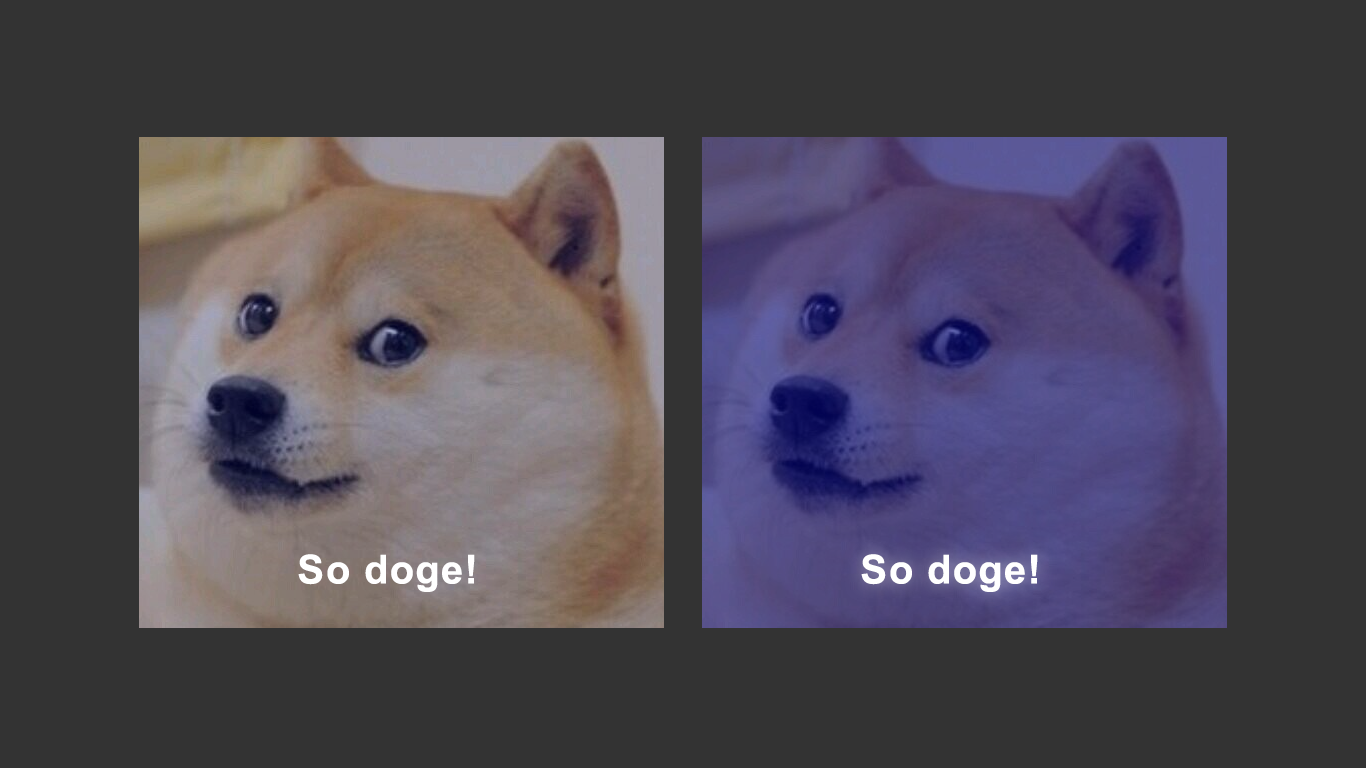
<style>
.page{position:relative;width:1366px;height:768px;background:#333333}
.page>*{position:absolute;margin:0}
.t1{font:40px "Arial-BoldMT";letter-spacing:0.04em;color:#ffffff}
</style>
<div class="page">
<p class="t1" style="left:298px;top:554px;width:177px;height:38px">So doge!</p>
<p class="t1" style="left:861px;top:554px;width:177px;height:38px">So doge!</p>
</div>
